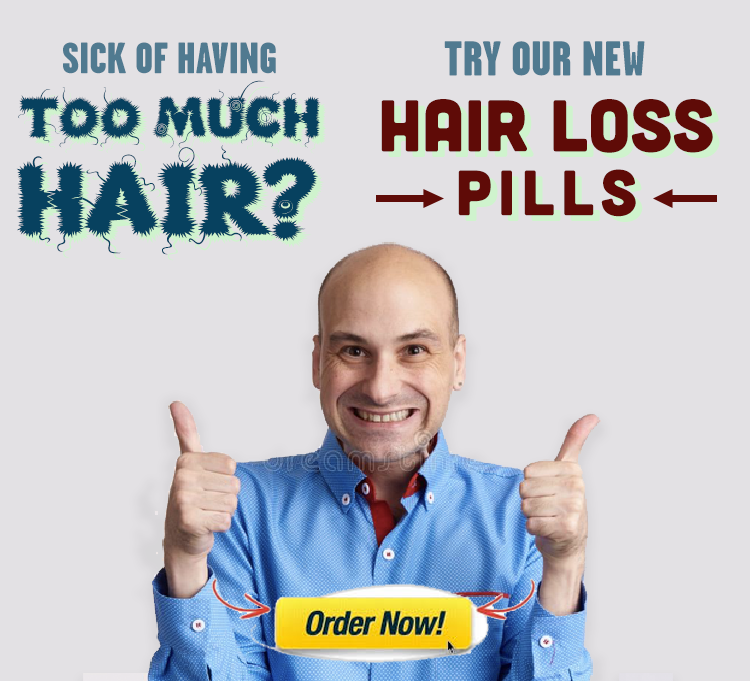
<style>
.page{position:relative;width:750px;height:681px;background:#e3e1e4}
.page>*{position:absolute;margin:0}
.t1{font:48.9px "GarageGothic-Black";color:#507a90}
.t2{font:44px "GarageGothic-Black";color:#507a90}
.t3{font:57.6px/96.6px "KingthingsLupineless";color:#07415f}
.t4{font:101.6px/96.6px "KingthingsLupineless";color:#07415f}
.t5{font:57.6px/96.6px "KingthingsLupineless"}
.t6{font:101.6px/96.6px "KingthingsLupineless"}
.t7{font:73.3px "Cubano-Regular";color:#5f0b07}
.t8{font:63.9px "Cubano-Regular";letter-spacing:0.1em;color:#5f0b07}
</style>
<div class="page">
<p class="t1" style="left:444px;top:41px;width:201px;height:35px">TRY OUR NEW</p>
<p class="t2" style="left:63px;top:42px;width:213px;height:32px">SICK OF HAVING</p>
<p class="t3" style="left:16px;top:80px;width:305px;height:175px;text-align:center">TOO MUCH <span class="t4">HAIR?</span></p>
<p class="t5" style="left:22px;top:86px;width:305px;height:175px;text-align:center">TOO MUCH <span class="t6">HAIR?</span></p>
<p class="t7" style="left:381px;top:99px;width:332px;height:54px">HAIR LOSS</p>
<p class="t8" style="left:458px;top:169px;width:178px;height:48px">PILLS</p>
</div>
